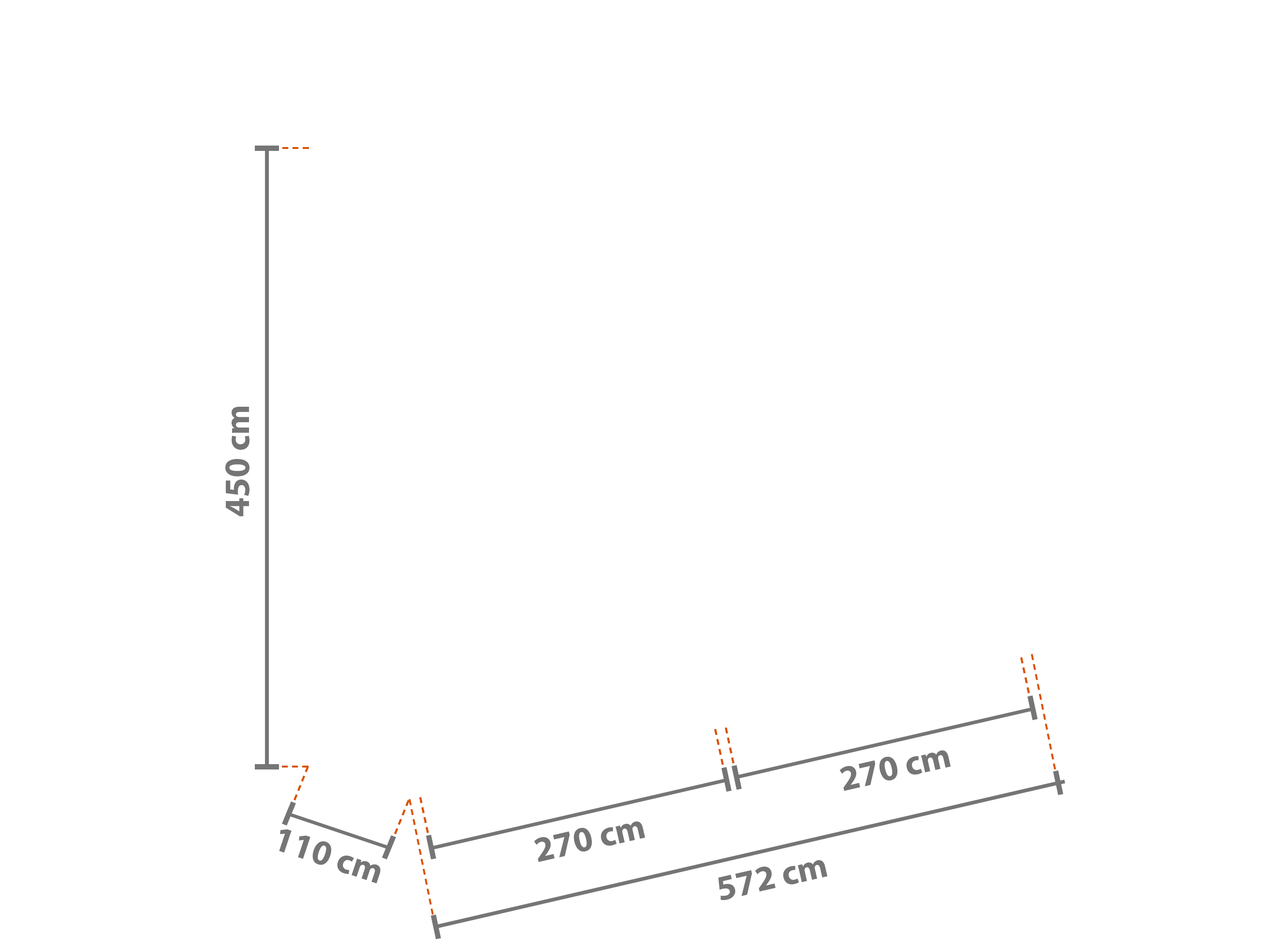
<style>
.page{position:relative;width:1261px;height:946px;background:#ffffff}
.page>*{position:absolute;margin:0}
.t1{font:35.5px "MyriadPro-Bold";color:#757575}
</style>
<div class="page">
<p class="t1" style="left:225px;top:407px;width:24px;height:109px;rotate:-90deg">450 cm</p>
<p class="t1" style="left:839px;top:750px;width:112px;height:41px;rotate:-13deg">270 cm</p>
<p class="t1" style="left:534px;top:821px;width:111px;height:41px;rotate:-13deg">270 cm</p>
<p class="t1" style="left:279px;top:829px;width:101px;height:54px;text-align:center;rotate:18deg">110 cm<br> cm</p>
<p class="t1" style="left:718px;top:860px;width:110px;height:40px;rotate:-13deg">572 cm</p>
</div>
